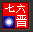
<style>
.page{position:relative;width:33px;height:32px;background:#f20000}
.page>*{position:absolute;margin:0}
.t1{font:10.4px "SimSun";color:#ffffff}
.t2{font:11.7px "SimSun";color:#ffffff}
</style>
<div class="page">
<p class="t1" style="left:5px;top:4px;width:20px;height:9px">七六</p>
<p class="t2" style="left:16px;top:15px;width:11px;height:12px">晋</p>
</div>
